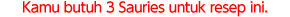
<style>
.page{position:relative;width:290px;height:17px;background:#ffffff}
.page>*{position:absolute;margin:0}
.t1{font:14px "UDShinGoPro-Medium";letter-spacing:-0.04em;color:#ff0000}
</style>
<div class="page">
<p class="t1" style="left:23px;top:1px;width:245px;height:16px">Kamu butuh 3 Sauries untuk resep ini.</p>
</div>
